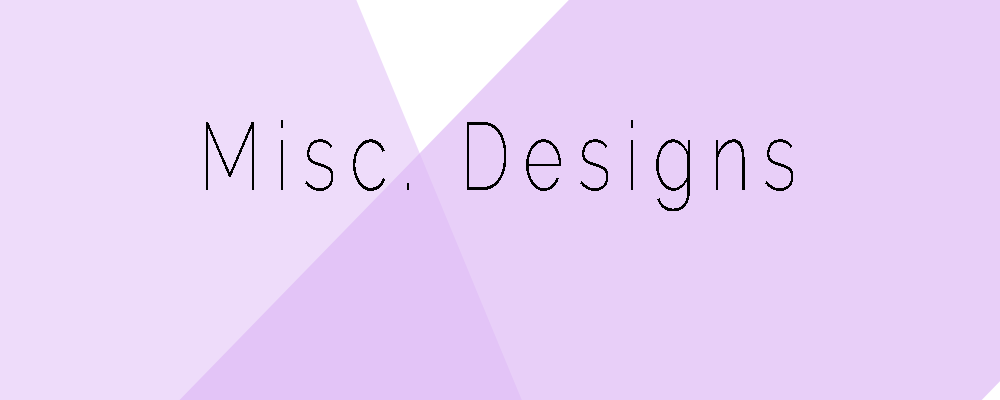
<style>
.page{position:relative;width:1000px;height:400px;background:#e8cff8}
.page>*{position:absolute;margin:0}
.t1{font:96.2px "Raleway-ExtraLight";letter-spacing:0.2em;color:#000000;scale:0.73 1}
</style>
<div class="page">
<p class="t1" style="left:206px;top:120px;width:587px;height:91px">Misc. Designs</p>
</div>
